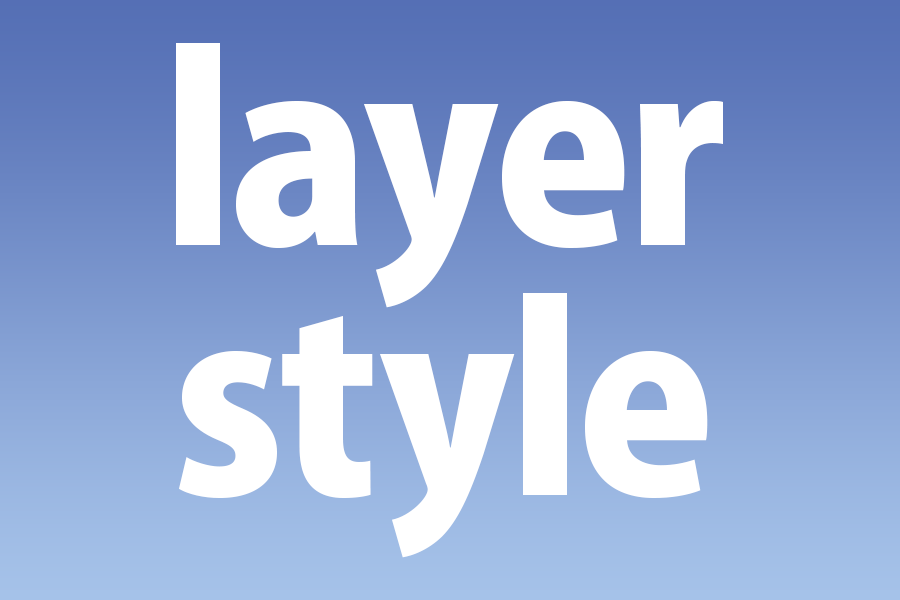
<style>
.page{position:relative;width:900px;height:600px}
.page>*{position:absolute;margin:0}
.t1{font:250px/250px "KozGoPro-Heavy";letter-spacing:-0.025em;color:#ffffff}
.t2{font:250px/250px "KozGoPro-Heavy";color:#ffffff}
</style>
<div class="page">
<p class="t1" style="left:176px;top:43px;width:547px;height:515px;text-align:center">layer<br>s<span class="t2">t</span>yle</p>
</div>
